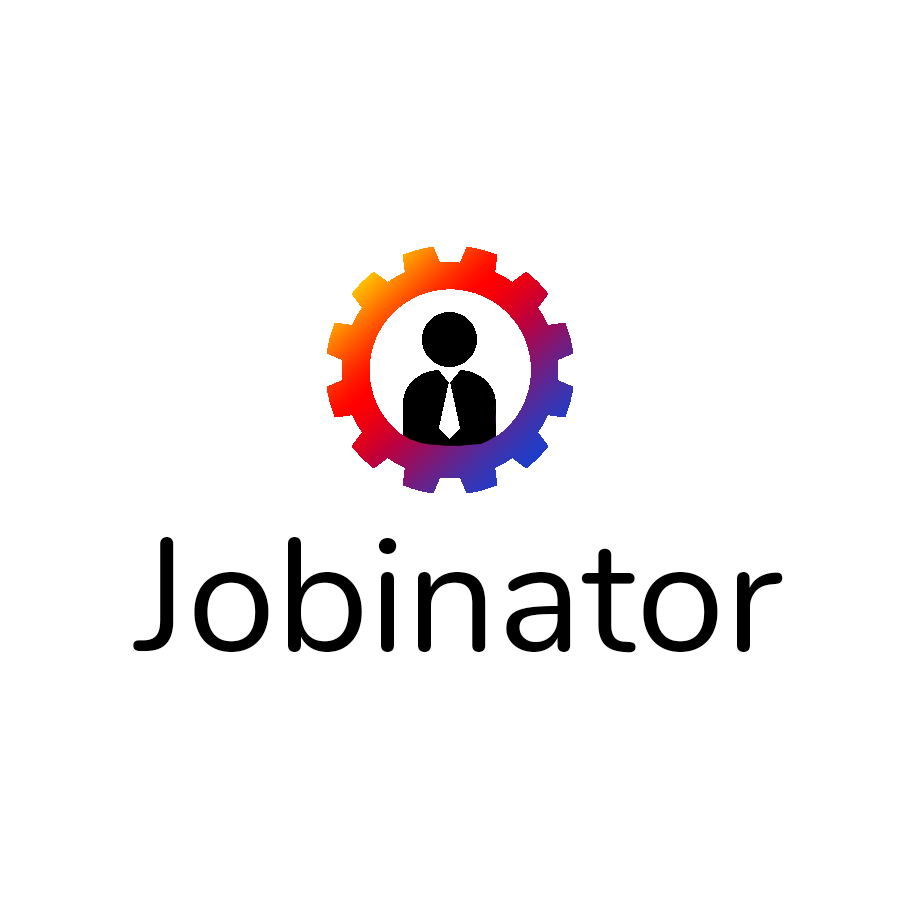
<style>
.page{position:relative;width:900px;height:900px;background:#ffffff}
.page>*{position:absolute;margin:0}
.t1{font:160px "Nunito-Regular";color:#000000}
</style>
<div class="page">
<p class="t1" style="left:133px;top:537px;width:650px;height:116px">Jobinator</p>
</div>
